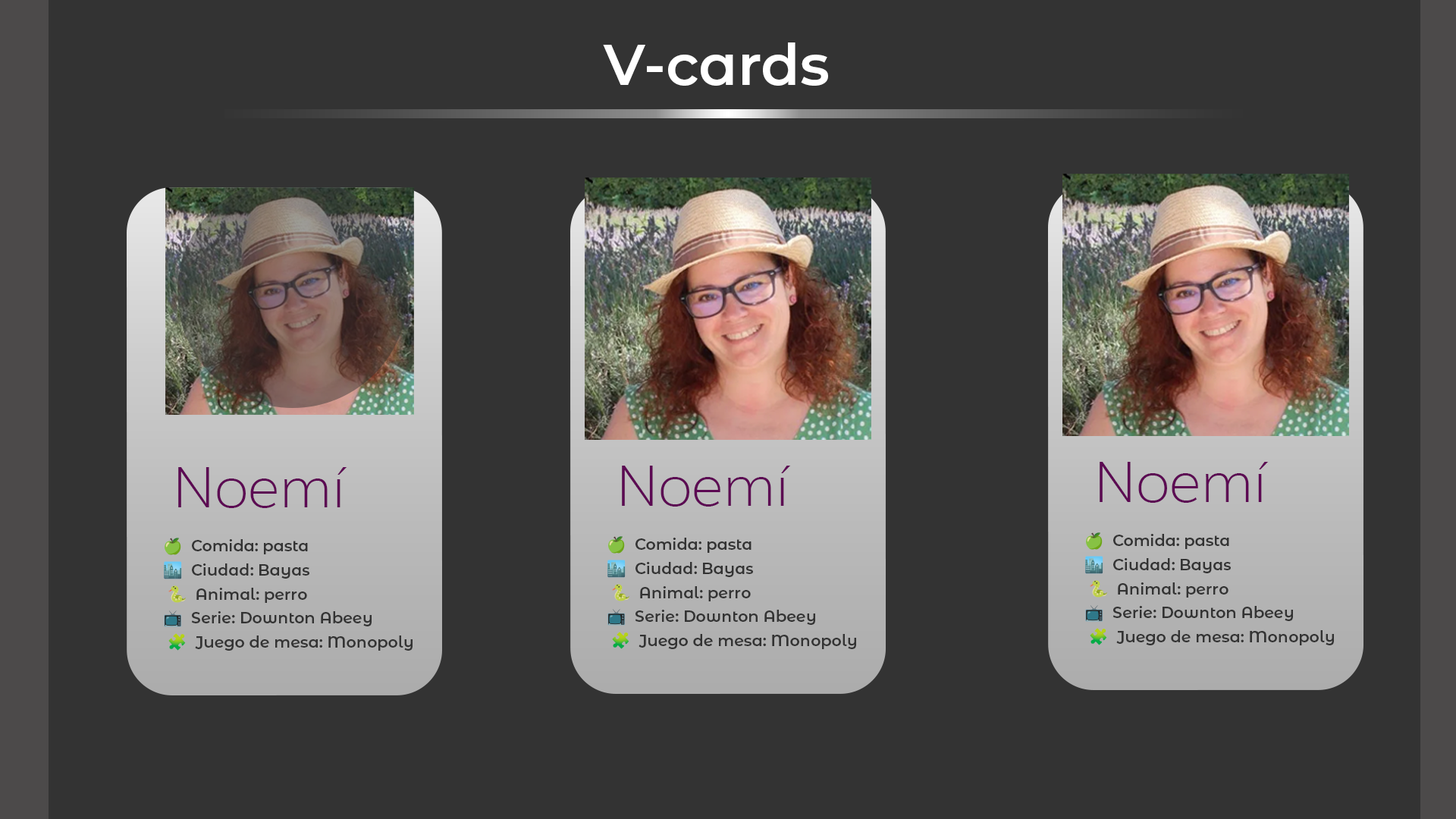
<style>
.page{position:relative;width:1456px;height:819px;background:#333333}
.page>*{position:absolute;margin:0}
.t1{font:56.9px "MontserratAlternates-SemiBold";color:#ffffff}
.t2{font:55.8px "Muli-ExtraLight";color:#5c0953}
.t3{font:15.6px/24px "MontserratAlternates-SemiBold";color:#333333}
.t4{font:15.6px/24px "NotoColorEmoji-SVG";color:#333333}
</style>
<div class="page">
<p class="t1" style="left:603px;top:42px;width:225px;height:44px">V-cards</p>
<p class="t2" style="left:1100px;top:462px;width:169px;height:41px">Noemí</p>
<p class="t2" style="left:178px;top:467px;width:169px;height:41px">Noemí</p>
<p class="t2" style="left:622px;top:466px;width:169px;height:41px">Noemí</p>
<p class="t3" style="left:1085px;top:532px;width:249px;height:114px"><span class="t4">🍏</span>  Comida: pasta<br><span class="t4">🏙</span>  Ciudad: Bayas<br> <span class="t4">🐍</span>  Animal: perro<br><span class="t4">📺</span>  Serie: Downton Abeey<br> <span class="t4">🧩</span>  Juego de mesa: Monopoly</p>
<p class="t3" style="left:164px;top:538px;width:249px;height:113px"><span class="t4">🍏</span>  Comida: pasta<br><span class="t4">🏙</span>  Ciudad: Bayas<br> <span class="t4">🐍</span>  Animal: perro<br><span class="t4">📺</span>  Serie: Downton Abeey<br> <span class="t4">🧩</span>  Juego de mesa: Monopoly</p>
<p class="t3" style="left:607px;top:536px;width:249px;height:114px"><span class="t4">🍏</span>  Comida: pasta<br><span class="t4">🏙</span>  Ciudad: Bayas<br> <span class="t4">🐍</span>  Animal: perro<br><span class="t4">📺</span>  Serie: Downton Abeey<br> <span class="t4">🧩</span>  Juego de mesa: Monopoly</p>
</div>
